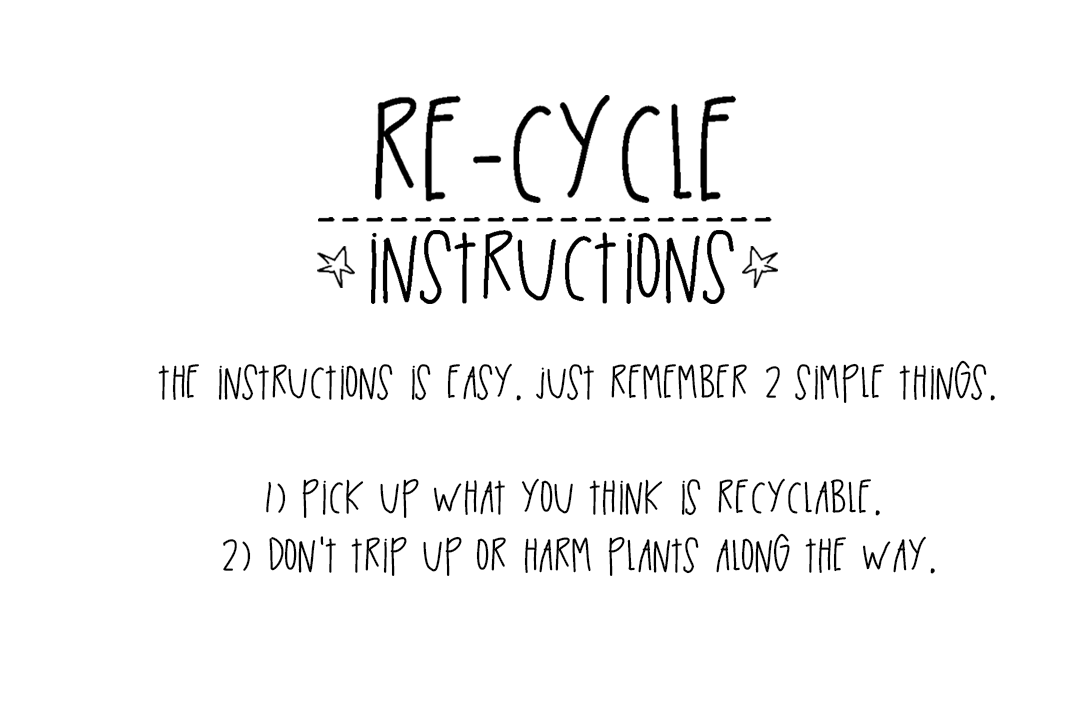
<style>
.page{position:relative;width:1080px;height:720px;background:#ffffff}
.page>*{position:absolute;margin:0}
.t1{font:48px "BlackTinBox";color:#030303}
</style>
<div class="page">
<p class="t1" style="left:158px;top:360px;width:837px;height:216px;text-align:center">The instructions is easy. Just remember 2 simple things.<br> <br>1) Pick up what you think is recyclable. <br>2) Don't trip up or harm plants along the way.</p>
</div>
